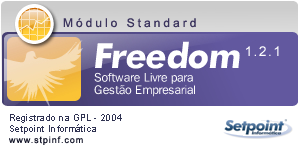
<style>
.page{position:relative;width:300px;height:150px;background:#ffffff}
.page>*{position:absolute;margin:0}
.t1{font:12px "ArialMT";letter-spacing:0.25em;color:#3c355e}
.t2{font:14px "ArialMT";letter-spacing:0.1em;color:#ffffff}
.t3{font:8.1px "ArialMT";letter-spacing:0.1em;color:#2f3251}
.t4{font:9px "ArialMT";letter-spacing:0.1em;color:#15172a}
</style>
<div class="page">
<p class="t1" style="left:63px;top:18px;width:133px;height:10px">Módulo Standard</p>
<p class="t2" style="left:246px;top:46px;width:33px;height:10px">1.2.1</p>
<p class="t3" style="left:10px;top:124px;width:86px;height:10px">Setpoint Informática</p>
<p class="t3" style="left:10px;top:114px;width:112px;height:9px">Registrado na GPL - 2004</p>
<p class="t4" style="left:9px;top:136px;width:74px;height:9px">www.stpinf.com</p>
</div>
